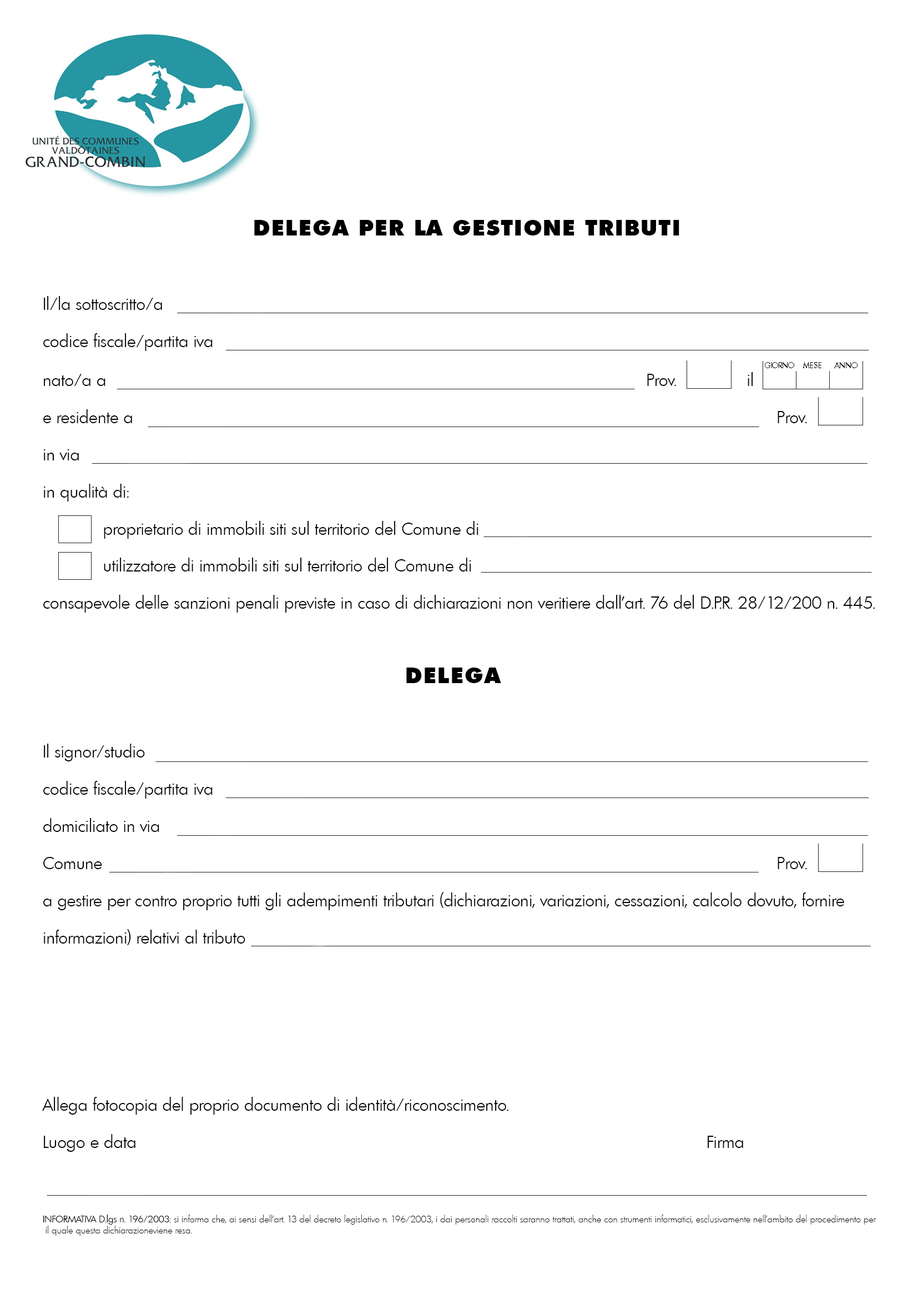
<style>
.page{position:relative;width:918px;height:1299px;background:#ffffff}
.page>*{position:absolute;margin:0}
.t1{font:17px/37.2px "Limerick-Serial-Light-Regular";color:#000000}
.t2{font:21.6px/37.2px "Limerick-Serial-Heavy-Regular";letter-spacing:0.1em;color:#000000}
.t3{font:17px/38.6px "Limerick-Serial-Light-Regular";color:#000000}
.t4{font:17px/55.5px "Limerick-Serial-Light-Regular";color:#000000}
.t5{font:9.3px/37.2px "Limerick-Serial-Light-Regular";color:#000000}
.t6{font:9.3px "Limerick-Serial-Light-Regular";color:#000000}
.t7{font:9.3px "Limerick-Serial-ExtraLight";color:#000000}
</style>
<div class="page">
<p class="t1" style="left:42px;top:220px;width:835px;height:1015px"><span class="t2">                         DELEGA PER LA GESTIONE TRIBUTI<br></span><br>Il/la sottoscritto/a<br>codice fiscale/partita iva<br><span class="t3">nato/a a                           Prov.    il<br></span>e residente a                                   Prov.<br>in via<br>in qualità di:<br>   proprietario di immobili siti sul territorio del Comune di<br>   utilizzatore di immobili siti sul territorio del Comune di<br>consapevole delle sanzioni penali previste in caso di dichiarazioni non veritiere dall’art. 76 del D.P.R. 28/12/200 n. 445.<br><br><span class="t2">                                           DELEGA<br></span><br>Il signor/studio<br>codice fiscale/partita iva<br>domiciliato in via<br>Comune                                    Prov.<br>a gestire per contro proprio tutti gli adempimenti tributari (dichiarazioni, variazioni, cessazioni, calcolo dovuto, fornire <br>informazioni) relativi al tributo<br><br><br><br><span class="t4">Allega fotocopia del proprio documento di identità/riconoscimento.<br></span>Luogo e data                             Firma<br><br><span class="t5">I</span><span class="t6">NFORMATIVA D.lgs n. 196/2003: </span><span class="t7">si informa che, ai sensi dell’art. 13 del decreto legislativo n. 196/2003, i dai personali raccolti saranno trattati, anche con strumenti informatici, esclusivamente nell’ambito del procedimento per<br> il quale questa dichiarazioneviene resa.</span></p>
</div>
